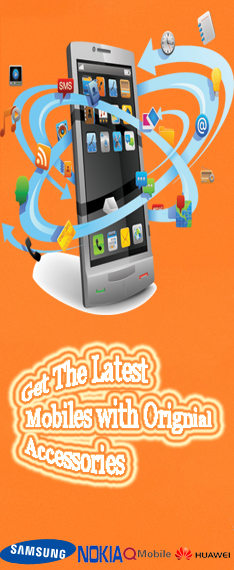
<style>
.page{position:relative;width:234px;height:570px}
.page>*{position:absolute;margin:0}
.t1{font:19px "Vani";color:#ffffff}
</style>
<div class="page">
<p class="t1" style="left:22px;top:355px;width:190px;height:120px">Get The Latest<br> Mobiles with Orignial<br> Accessories</p>
</div>
